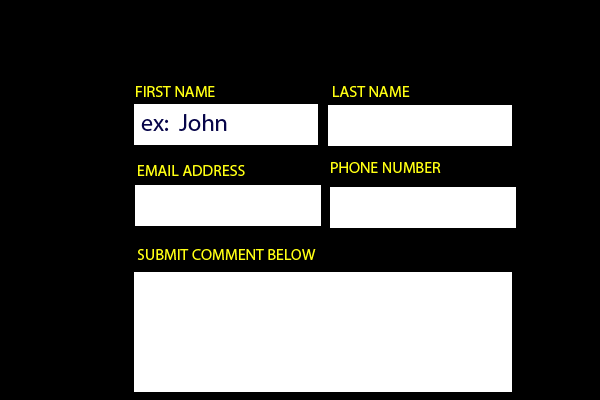
<style>
.page{position:relative;width:600px;height:400px;background:#000000}
.page>*{position:absolute;margin:0}
.t1{font:16px "MyriadPro-Regular";color:#ffff13}
.t2{font:24px "MyriadPro-Regular";color:#070549}
</style>
<div class="page">
<p class="t1" style="left:136px;top:86px;width:79px;height:11px">FIRST NAME</p>
<p class="t1" style="left:333px;top:86px;width:77px;height:11px">LAST NAME</p>
<p class="t2" style="left:141px;top:114px;width:86px;height:17px">ex:  John</p>
<p class="t1" style="left:138px;top:165px;width:107px;height:11px">EMAIL ADDRESS</p>
<p class="t1" style="left:331px;top:162px;width:110px;height:11px">PHONE NUMBER</p>
<p class="t1" style="left:137px;top:249px;width:179px;height:11px">SUBMIT COMMENT BELOW</p>
</div>
